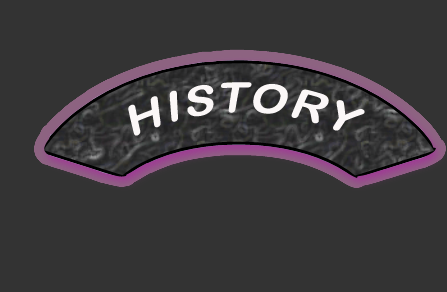
<style>
.page{position:relative;width:447px;height:292px;background:#333333}
.page>*{position:absolute;margin:0}
.t1{font:72px "ArialRoundedMTBold";letter-spacing:0.1em;color:#fbf7f7;font-style:italic}
</style>
<div class="page">
<p class="t1" style="left:128px;top:82px;width:237px;height:54px">HISTORY</p>
</div>
